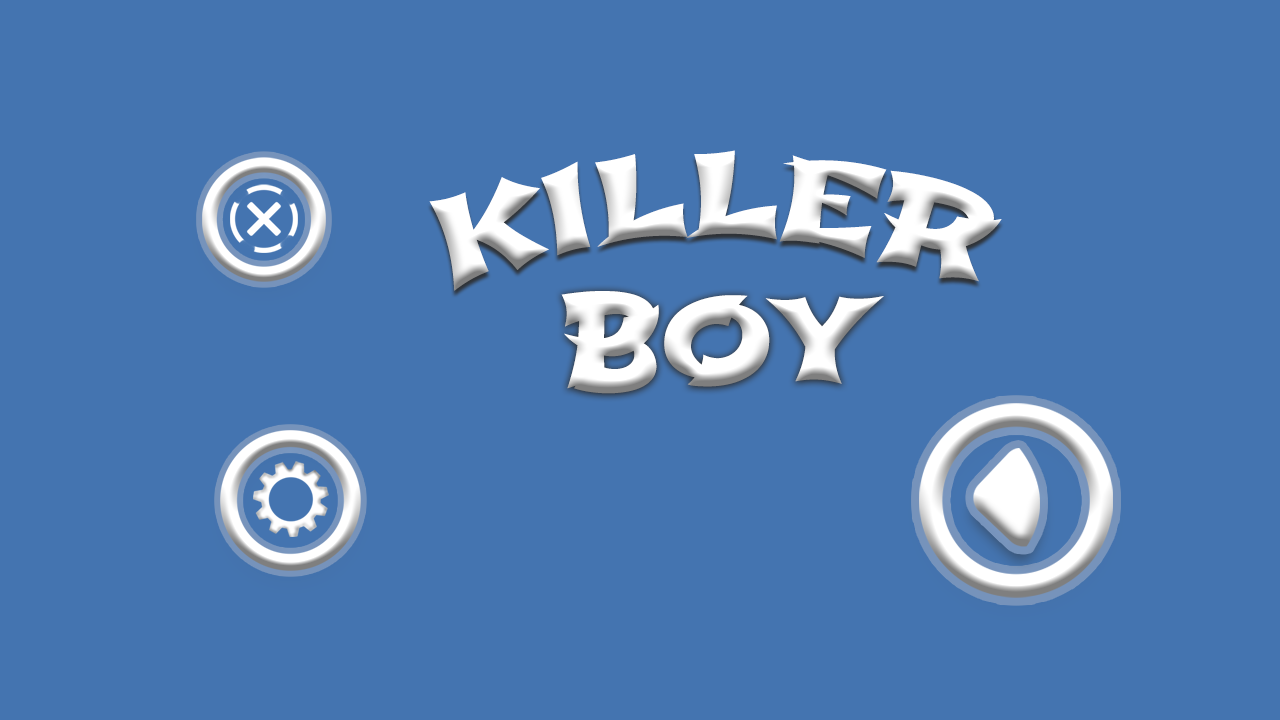
<style>
.page{position:relative;width:1280px;height:720px;background:#4474b0}
.page>*{position:absolute;margin:0}
.t1{font:117.5px "Shojumaru-Regular";color:#ffffff}
.t2{font:121.2px "Shojumaru-Regular";color:#ffffff}
</style>
<div class="page">
<p class="t1" style="left:429px;top:150px;width:573px;height:141px">KILLER</p>
<p class="t2" style="left:561px;top:291px;width:323px;height:103px">BOY</p>
</div>
